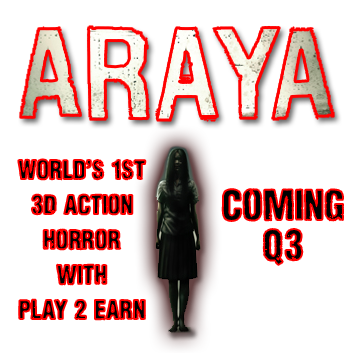
<style>
.page{position:relative;width:360px;height:353px;background:#ffffff}
.page>*{position:absolute;margin:0}
.t1{font:25px/35px "Nidex"}
.t2{font:40px/20px "Nidex"}
</style>
<div class="page">
<p class="t1" style="left:18px;top:159px;width:128px;height:161px;text-align:center">WORLD’S 1ST<br>3d action<br>horror<br>with<br>play 2 earn</p>
<p class="t2" style="left:222px;top:189px;width:121px;height:76px;text-align:center">Coming<br><br>q3</p>
</div>
